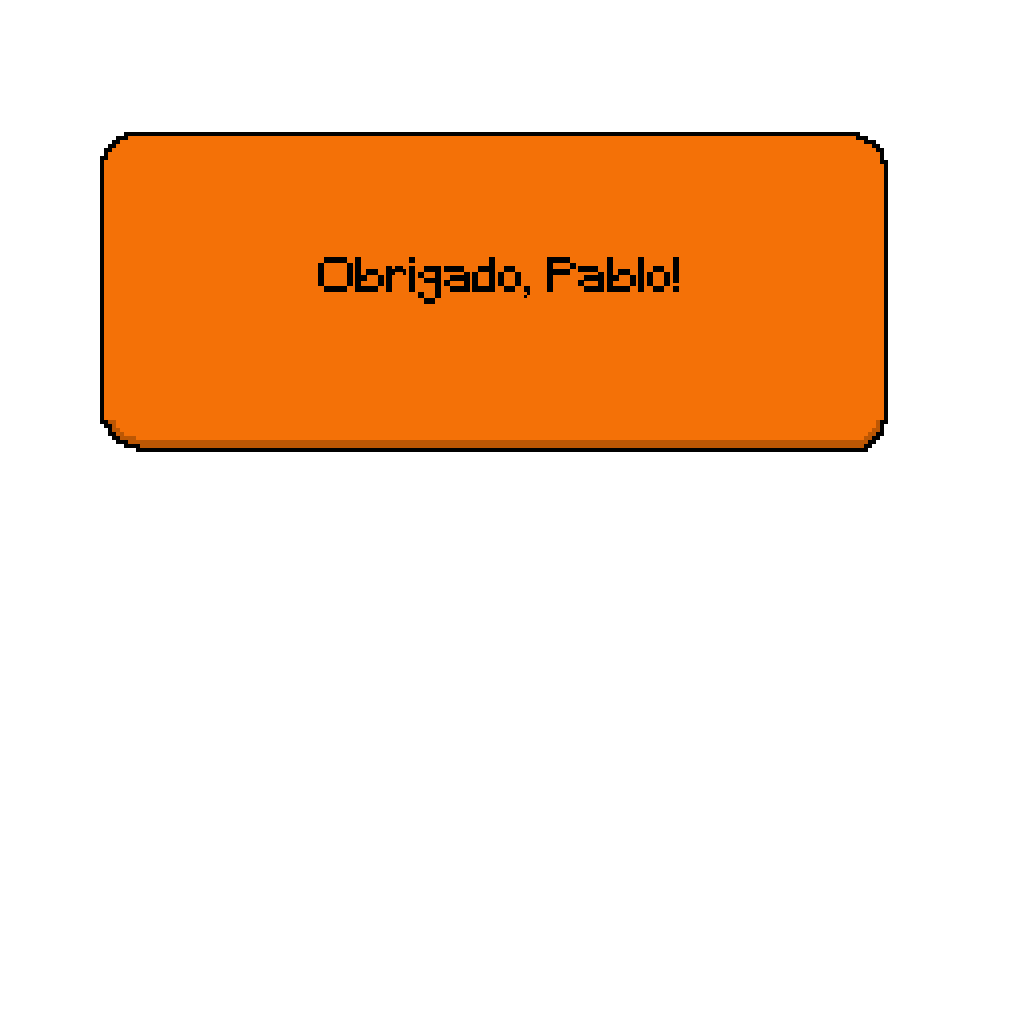
<style>
.page{position:relative;width:1024px;height:1024px;background:#ffffff}
.page>*{position:absolute;margin:0}
.t1{font:45.8px "Minecraft";color:#000000}
</style>
<div class="page">
<p class="t1" style="left:318px;top:257px;width:361px;height:47px">Obrigado, Pablo!</p>
</div>
